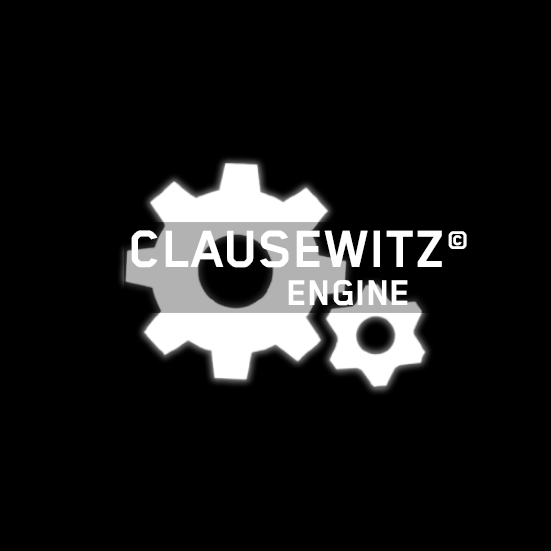
<style>
.page{position:relative;width:551px;height:551px;background:#000000}
.page>*{position:absolute;margin:0}
.t1{font:60.7px "BlenderPro-Bold";color:#ffffff}
.t2{font:29.5px "BlenderPro-Bold";color:#ffffff}
.t3{font:41.2px "BlenderPro-Bold";color:#ffffff}
</style>
<div class="page">
<p class="t1" style="left:131px;top:230px;width:311px;height:38px">CLAUSEWITZ</p>
<p class="t2" style="left:448px;top:231px;width:19px;height:18px">©</p>
<p class="t3" style="left:288px;top:280px;width:120px;height:26px">ENGINE</p>
</div>
